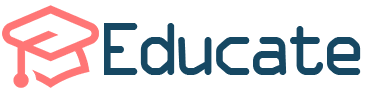
<style>
.page{position:relative;width:365px;height:92px;background:#ffffff}
.page>*{position:absolute;margin:0}
.t1{font:80.2px "OCRAExtended";letter-spacing:-0.14em;color:#164863}
</style>
<div class="page">
<p class="t1" style="left:104px;top:23px;width:257px;height:52px">Educate</p>
</div>
